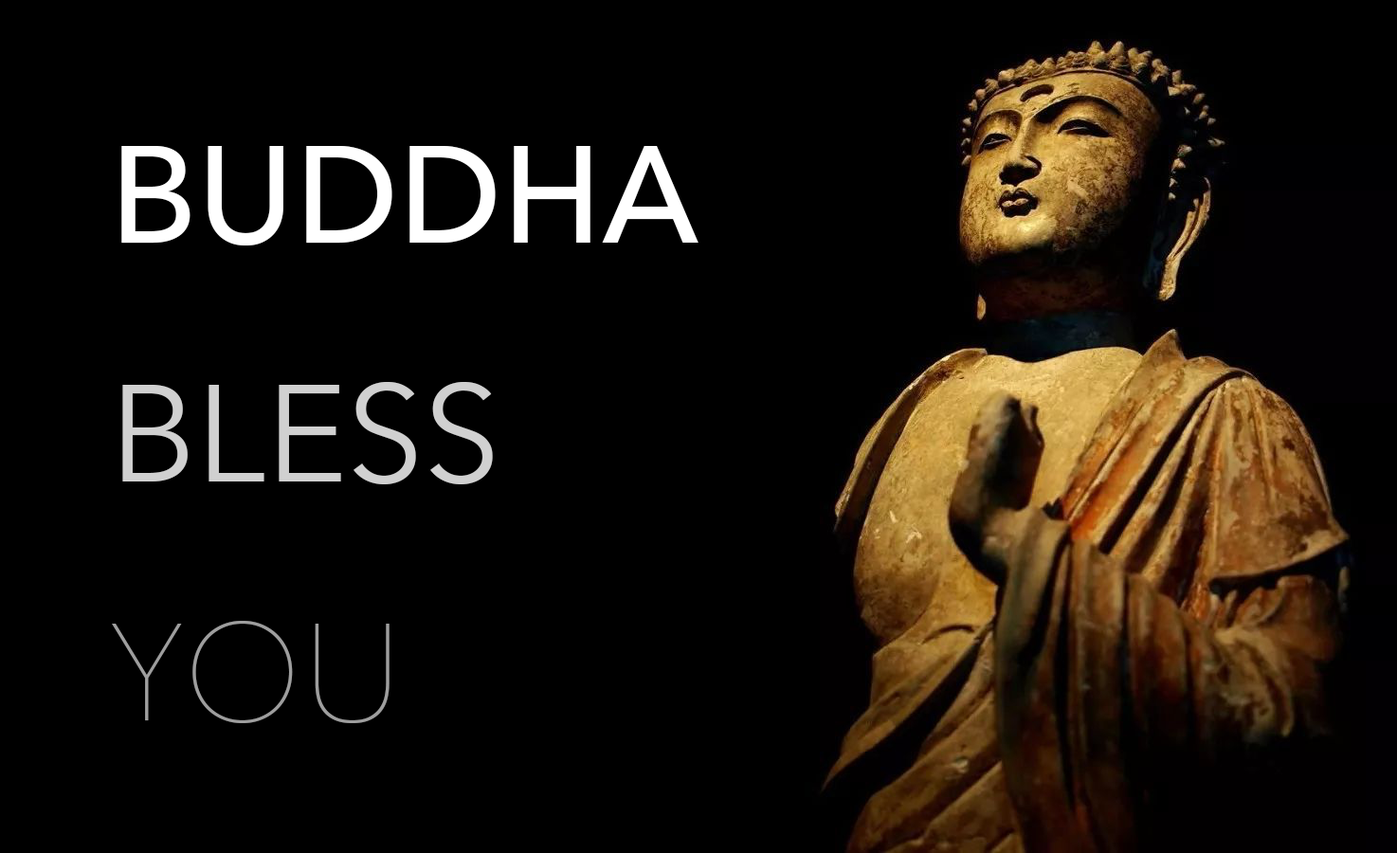
<style>
.page{position:relative;width:1397px;height:853px;background:#000000}
.page>*{position:absolute;margin:0}
.t1{font:136.5px "AvenirNext-Medium";color:#ffffff}
.t2{font:136.5px "AvenirNext-Regular";color:#d0d0d0}
.t3{font:136.5px "AvenirNext-UltraLight";color:#9e9e9e}
</style>
<div class="page">
<p class="t1" style="left:112px;top:146px;width:587px;height:577px">BUDDHA<br><span class="t2">BLESS<br></span><span class="t3">YOU</span></p>
</div>
